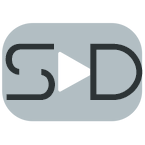
<style>
.page{position:relative;width:145px;height:145px;background:#b2bec3}
.page>*{position:absolute;margin:0}
.t1{font:90px "EarthOrbiter";color:#2d3436}
</style>
<div class="page">
<p class="t1" style="left:5px;top:43px;width:50px;height:57px">S</p>
<p class="t1" style="left:90px;top:43px;width:53px;height:57px">D</p>
</div>
